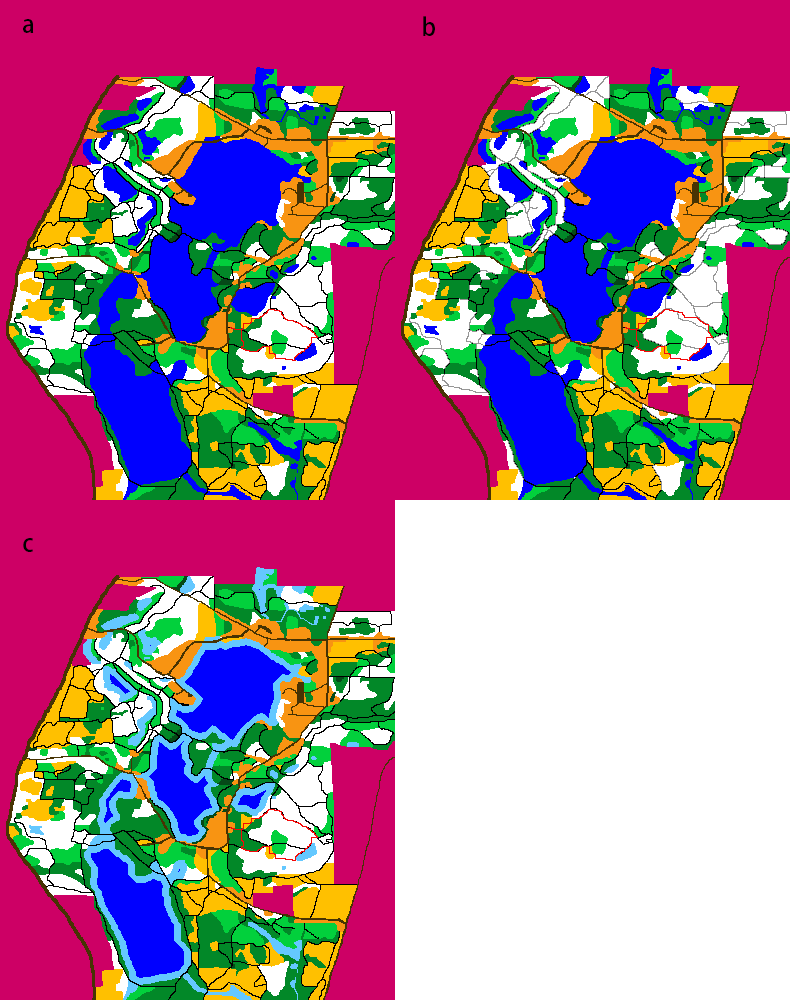
<style>
.page{position:relative;width:790px;height:1000px;background:#ffffff}
.page>*{position:absolute;margin:0}
.t1{font:24px "AdobeHeitiStd-Regular";color:#000000}
</style>
<div class="page">
<p class="t1" style="left:423px;top:16px;width:12px;height:20px">b</p>
<p class="t1" style="left:23px;top:19px;width:11px;height:14px">a</p>
<p class="t1" style="left:23px;top:538px;width:10px;height:14px">c</p>
</div>
